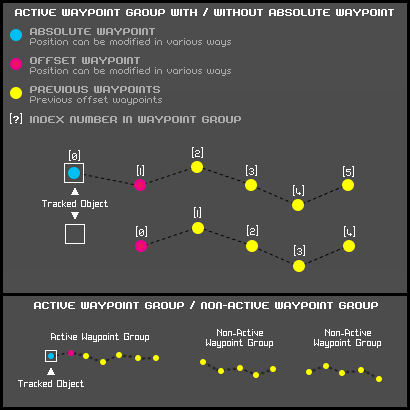
<style>
.page{position:relative;width:410px;height:410px;background:#4c4c4c}
.page>*{position:absolute;margin:0}
.t1{font:8px "00Acrobatix";color:#ffffff;text-transform:uppercase;font-weight:bold}
.t2{font:8px "00Acrobatix";color:#ababab}
.t3{font:8px "00Acrobatix";color:#ababab;font-weight:bold}
.t4{font:8px "00Acrobatix";color:#ababab;text-transform:uppercase;font-weight:bold}
.t5{font:8px "00Acrobatix";color:#ffffff;text-transform:uppercase}
.t6{font:8px "00Acrobatix";color:#ffffff}
.t7{font:12px "ArialMT";color:#ffffff}
.t8{font:8px "00Cryonix";color:#ffffff}
</style>
<div class="page">
<p class="t1" style="left:15px;top:8px;width:379px;height:8px">Active Waypoint Group with / without absolute Waypoint</p>
<p class="t2" style="left:30px;top:28px;width:201px;height:19px"><span class="t3">ABSOLUTE WAYPOINT<br></span>Position can be modified in various ways</p>
<p class="t2" style="left:30px;top:57px;width:201px;height:19px"><span class="t3">OFFSET WAYPOINT</span><br>Position can be modified in various ways</p>
<p class="t2" style="left:30px;top:86px;width:132px;height:19px"><span class="t3">PREVIOUS WAYPOINTS<br></span>Previous offset waypoints</p>
<p class="t4" style="left:10px;top:113px;width:231px;height:11px"><span class="t5">[</span><span class="t1">?</span><span class="t5">] </span>Index number in waypoint group</p>
<p class="t6" style="left:69px;top:150px;width:11px;height:11px">[0]</p>
<p class="t6" style="left:192px;top:147px;width:11px;height:11px">[2]</p>
<p class="t6" style="left:137px;top:165px;width:7px;height:11px">[1]</p>
<p class="t6" style="left:246px;top:165px;width:11px;height:11px">[3]</p>
<p class="t6" style="left:343px;top:166px;width:11px;height:11px">[5]</p>
<p class="t6" style="left:293px;top:185px;width:11px;height:11px">[4]</p>
<p class="t7" style="left:71px;top:188px;width:8px;height:7px">▲</p>
<p class="t8" style="left:42px;top:200px;width:66px;height:9px">Tracked Object</p>
<p class="t6" style="left:194px;top:207px;width:7px;height:11px">[1]</p>
<p class="t7" style="left:71px;top:212px;width:8px;height:7px">▲</p>
<p class="t6" style="left:136px;top:226px;width:11px;height:11px">[0]</p>
<p class="t6" style="left:247px;top:225px;width:11px;height:11px">[2]</p>
<p class="t6" style="left:344px;top:226px;width:11px;height:11px">[4]</p>
<p class="t6" style="left:294px;top:245px;width:11px;height:11px">[3]</p>
<p class="t1" style="left:34px;top:301px;width:344px;height:8px">Active Waypoint Group / Non-Active Waypoint Group</p>
<p class="t8" style="left:206px;top:329px;width:67px;height:19px;text-align:center">Non-Active<br>Waypoint Group</p>
<p class="t8" style="left:314px;top:329px;width:67px;height:19px;text-align:center">Non-Active<br>Waypoint Group</p>
<p class="t8" style="left:51px;top:333px;width:98px;height:9px">Active Waypoint Group</p>
<p class="t7" style="left:47px;top:368px;width:8px;height:7px">▲</p>
<p class="t8" style="left:18px;top:380px;width:66px;height:9px">Tracked Object</p>
</div>
